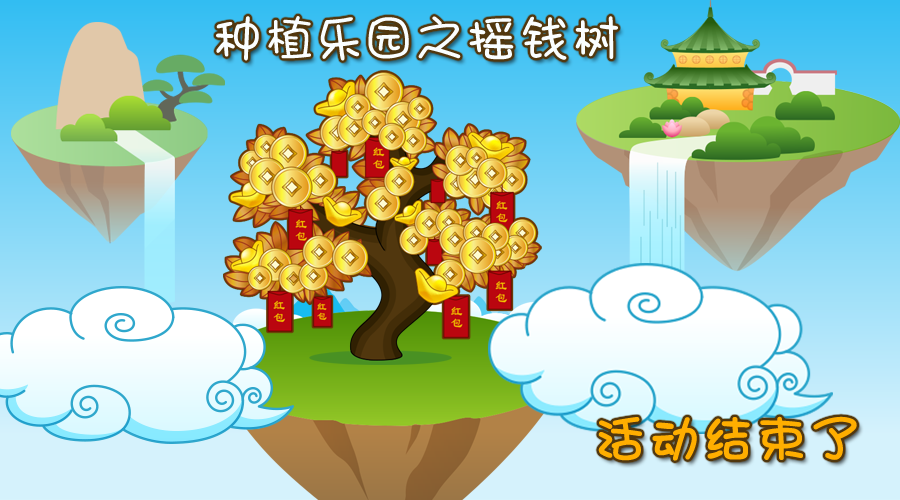
<style>
.page{position:relative;width:900px;height:500px}
.page>*{position:absolute;margin:0}
.t1{font:48px "STHeitiTC-Light";letter-spacing:0.2em;color:#fafeff}
.t2{font:48px "STHeitiTC-Light";letter-spacing:0.2em;color:#ffae00;font-weight:bold}
</style>
<div class="page">
<p class="t1" style="left:216px;top:16px;width:402px;height:45px">种植乐园之摇钱树</p>
<p class="t2" style="left:598px;top:416px;width:259px;height:45px">活动结束了</p>
</div>
